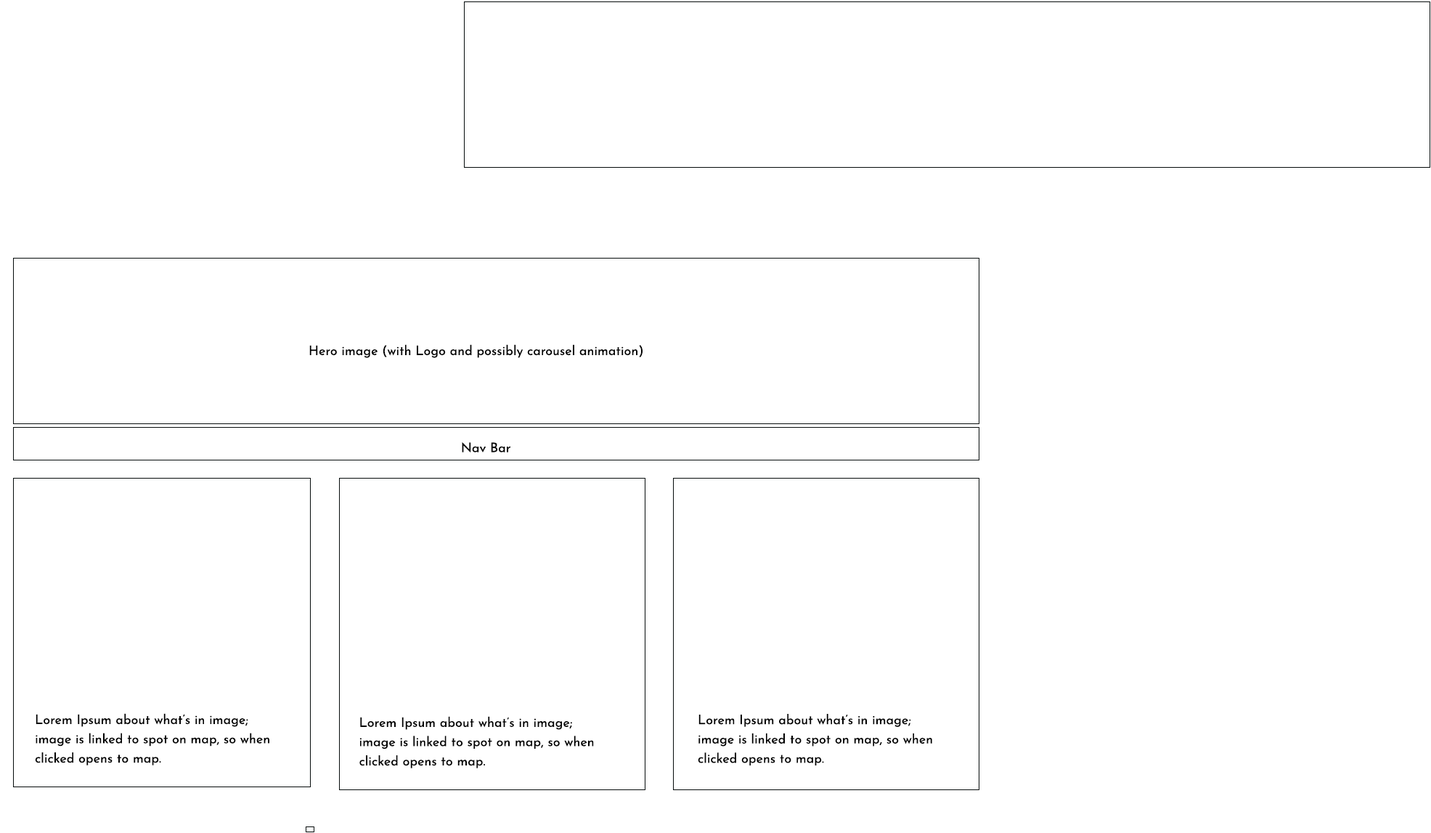
<style>
.page{position:relative;width:1431px;height:833px;background:#ffffff}
.page>*{position:absolute;margin:0}
.t1{font:13.1px "JosefinSans-Regular";color:#000000}
</style>
<div class="page">
<p class="t1" style="left:309px;top:344px;width:334px;height:14px">Hero image (with Logo and possibly carousel animation)</p>
<p class="t1" style="left:462px;top:442px;width:49px;height:10px">Nav Bar</p>
<p class="t1" style="left:35px;top:713px;width:234px;height:52px">Lorem Ipsum about what’s in image;<br>image is linked to spot on map, so when <br>clicked opens to map.</p>
<p class="t1" style="left:698px;top:714px;width:235px;height:51px">Lorem Ipsum about what’s in image;<br>image is linked to spot on map, so when <br>clicked opens to map.</p>
<p class="t1" style="left:359px;top:716px;width:235px;height:52px">Lorem Ipsum about what’s in image;<br>image is linked to spot on map, so when <br>clicked opens to map.</p>
</div>
